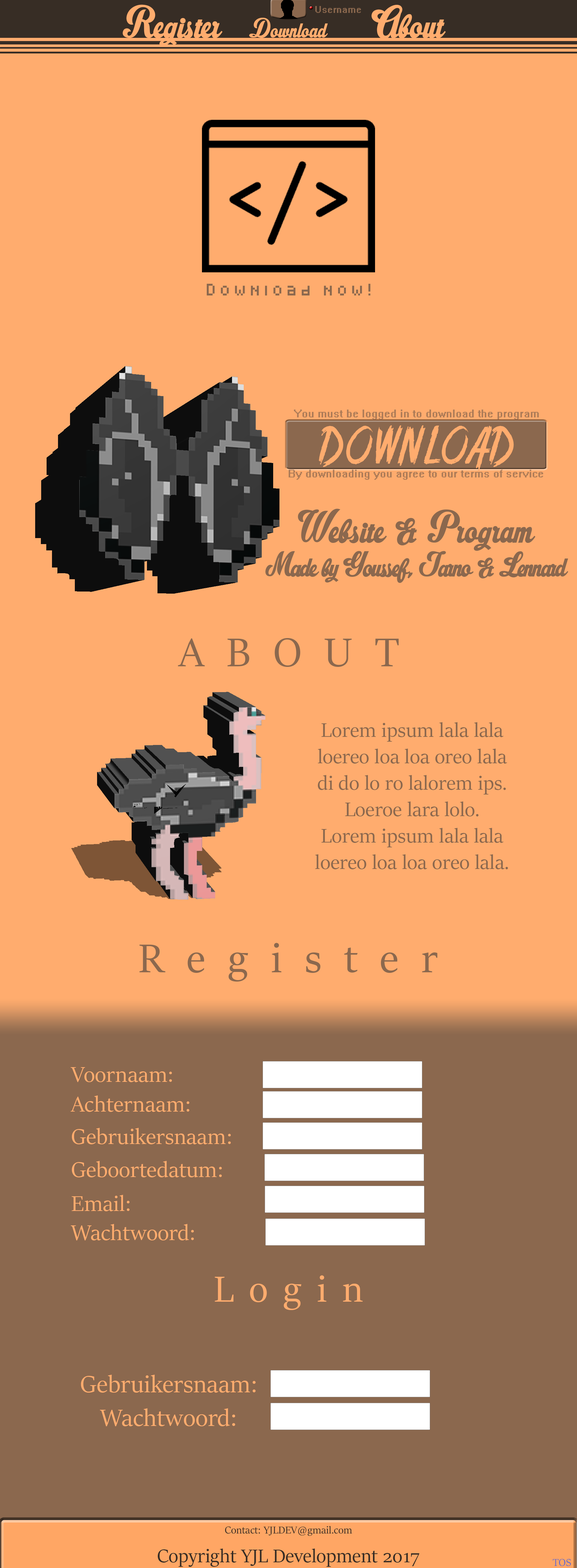
<style>
.page{position:relative;width:577px;height:1568px;background:#ffac6e}
.page>*{position:absolute;margin:0}
.t1{font:45px "RistellaPERSONALUSEONLY";letter-spacing:0.005em;color:#ffac6e}
.t2{font:27.1px "RistellaPERSONALUSEONLY";letter-spacing:0.005em;color:#ffac6e}
.t3{font:8.9px "System";letter-spacing:0.005em;color:#8b684e}
.t4{font:9.8px "Pixeled";letter-spacing:0.445em;color:#8b684e}
.t5{font:10px "System";letter-spacing:0.005em;color:#ac7b57}
.t6{font:69.1px "Stranger-back-in-the-Night";letter-spacing:0.025em;color:#ffac6e}
.t7{font:45px "RistellaPERSONALUSEONLY";letter-spacing:0.005em;color:#8b684e}
.t8{font:34.7px "RistellaPERSONALUSEONLY";letter-spacing:-0.035em;color:#8b684e}
.t9{font:45px "SitkaBanner";letter-spacing:0.505em;color:#8b684e}
.t10{font:22px "SitkaBanner";letter-spacing:0.005em;color:#8b684e}
.t11{font:24.1px "SitkaBanner";letter-spacing:0.005em;color:#ffac6e}
.t12{font:40.4px "SitkaBanner";letter-spacing:0.385em;color:#ffac6e}
.t13{font:26.5px "SitkaBanner";letter-spacing:0.005em;color:#ffac6e}
.t14{font:11.2px "SitkaBanner";letter-spacing:0.005em;color:#372d25}
.t15{font:20.6px "SitkaBanner";letter-spacing:0.005em;color:#372d25}
.t16{font:11.2px "SitkaBanner";letter-spacing:0.005em;color:#6168c9}
</style>
<div class="page">
<p class="t1" style="left:123px;top:5px;width:99px;height:41px">Register</p>
<p class="t1" style="left:371px;top:5px;width:75px;height:34px">About</p>
<p class="t2" style="left:249px;top:18px;width:79px;height:20px">Download</p>
<p class="t3" style="left:315px;top:6px;width:46px;height:7px">Username</p>
<p class="t4" style="left:207px;top:284px;width:163px;height:11px">Download now!</p>
<p class="t5" style="left:294px;top:410px;width:244px;height:10px">You must be logged in to download the program</p>
<p class="t6" style="left:319px;top:425px;width:194px;height:46px">DOWNLOAD</p>
<p class="t5" style="left:288px;top:470px;width:255px;height:10px">By downloading you agree to our terms of service</p>
<p class="t7" style="left:298px;top:509px;width:237px;height:42px">Website &amp; Program</p>
<p class="t8" style="left:265px;top:551px;width:303px;height:32px">Made by Youssef, Jarno &amp; Lennard</p>
<p class="t9" style="left:178px;top:638px;width:220px;height:29px">ABOUT</p>
<p class="t10" style="left:315px;top:722px;width:193px;height:147px;text-align:center">Lorem ipsum lala lala<br>loereo loa loa oreo lala<br>di do lo ro lalorem ips.<br>Loeroe lara lolo.<br>Lorem ipsum lala lala<br>loereo loa loa oreo lala.</p>
<p class="t9" style="left:139px;top:943px;width:298px;height:39px">Register</p>
<p class="t11" style="left:71px;top:1067px;width:101px;height:15px">Voornaam:</p>
<p class="t11" style="left:71px;top:1095px;width:118px;height:17px">Achternaam:</p>
<p class="t11" style="left:72px;top:1128px;width:159px;height:16px">Gebruikersnaam:</p>
<p class="t11" style="left:72px;top:1161px;width:150px;height:16px">Geboortedatum:</p>
<p class="t11" style="left:71px;top:1195px;width:58px;height:16px">Email:</p>
<p class="t11" style="left:71px;top:1224px;width:123px;height:16px">Wachtwoord:</p>
<p class="t12" style="left:214px;top:1275px;width:148px;height:35px">Login</p>
<p class="t13" style="left:81px;top:1375px;width:175px;height:18px">Gebruikersnaam:</p>
<p class="t13" style="left:100px;top:1408px;width:135px;height:18px">Wachtwoord:</p>
<p class="t14" style="left:225px;top:1526px;width:127px;height:10px">Contact: YJLDEV@gmail.com</p>
<p class="t15" style="left:158px;top:1548px;width:261px;height:19px">Copyright YJL Development 2017</p>
<p class="t16" style="left:552px;top:1559px;width:19px;height:7px">TOS</p>
</div>
